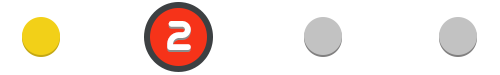
<style>
.page{position:relative;width:500px;height:75px;background:#ffffff}
.page>*{position:absolute;margin:0}
.t1{font:45.6px "GeometrySoftPro-BoldN"}
.t2{font:45.6px "GeometrySoftPro-BoldN";color:#ffffff}
</style>
<div class="page">
<p class="t1" style="left:167px;top:23px;width:24px;height:29px">2</p>
<p class="t2" style="left:167px;top:21px;width:24px;height:29px">2</p>
</div>
